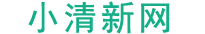
<style>
.page{position:relative;width:205px;height:34px;background:#ffffff}
.page>*{position:absolute;margin:0}
.t1{font:34px "SimHei";letter-spacing:0.1em;color:#15ae89}
</style>
<div class="page">
<p class="t1" style="left:28px;top:1px;width:142px;height:33px">小清新网</p>
</div>
